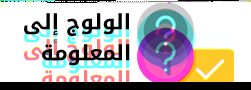
<style>
.page{position:relative;width:251px;height:90px;background:#ffffff}
.page>*{position:absolute;margin:0}
.t1{font:21px "DroidArabicKufi-Bold"}
</style>
<div class="page">
<p class="t1" style="left:24px;top:21px;width:105px;height:23px">الولوج إلى</p>
<p class="t1" style="left:42px;top:52px;width:88px;height:22px">المعلومة</p>
</div>
